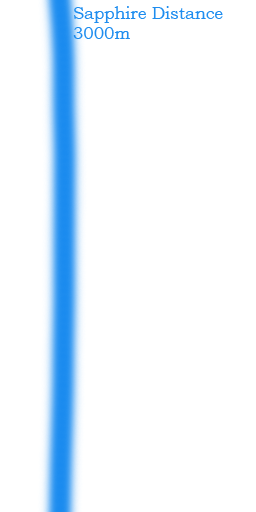
<style>
.page{position:relative;width:256px;height:512px;background:#ffffff}
.page>*{position:absolute;margin:0}
.t1{font:16.7px "BookmanOldStyle";color:#1e8def}
</style>
<div class="page">
<p class="t1" style="left:73px;top:6px;width:150px;height:33px">Sapphire Distance<br>3000m</p>
</div>
